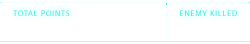
<style>
.page{position:relative;width:250px;height:44px;background:#ffffff}
.page>*{position:absolute;margin:0}
.t1{font:8px "MyriadPro-Regular";letter-spacing:0.1em;text-transform:uppercase}
</style>
<div class="page">
<p class="t1" style="left:13px;top:10px;width:57px;height:6px">Total Points</p>
<p class="t1" style="left:180px;top:10px;width:57px;height:6px">enemy killed</p>
</div>
